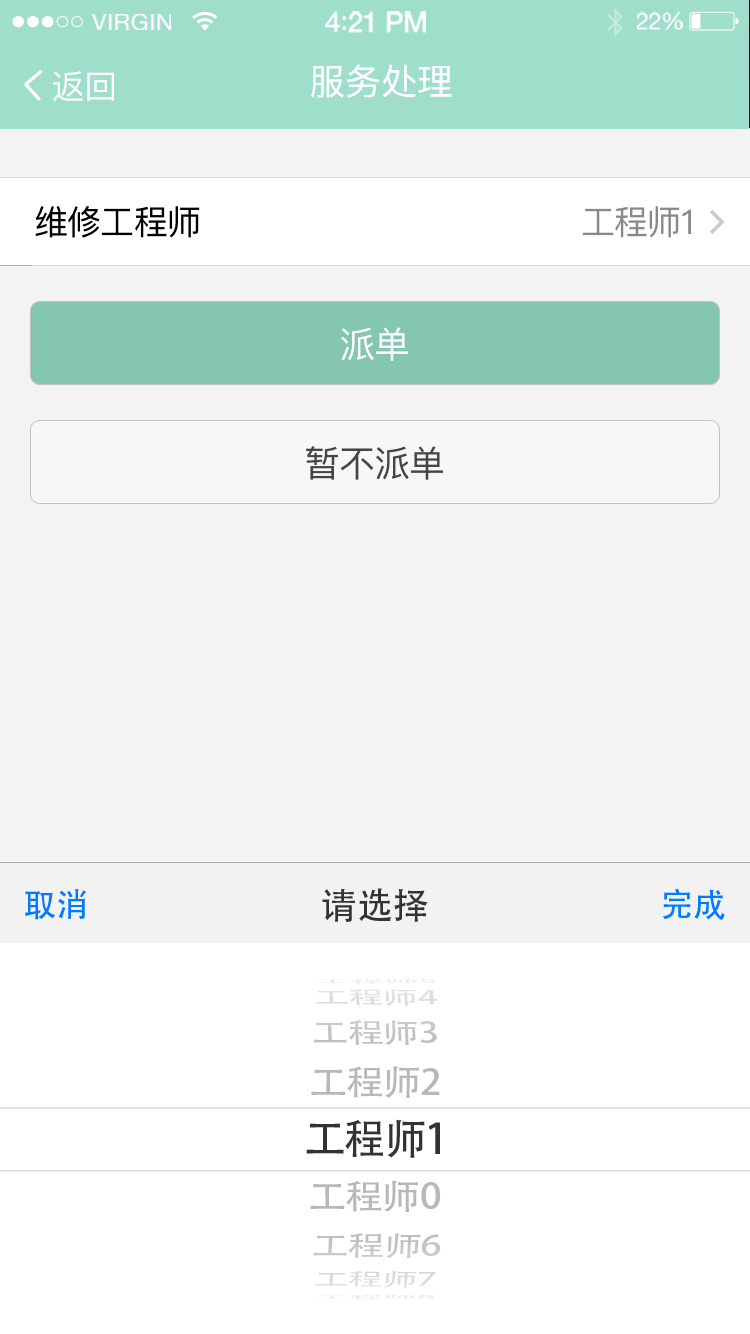
<style>
.page{position:relative;width:750px;height:1334px;background:#f3f3f3}
.page>*{position:absolute;margin:0}
.t1{font:23.4px "HelveticaNeue";letter-spacing:0.02em;color:#ffffff}
.t2{font:28.1px "HelveticaNeue-Medium";letter-spacing:-0.02em;color:#ffffff}
.t3{font:28.1px "Avenir-Medium";letter-spacing:-0.02em;color:#ffffff}
.t4{font:23.5px "HelveticaNeue";letter-spacing:-0.02em;color:#ffffff}
.t5{font:36px "PingFangSC-Medium";color:#ffffff}
.t6{font:33.3px "PingFangSC-Medium";color:#ffffff}
.t7{font:36px "PingFangSC-Medium"}
.t8{font:34px "PingFangSC-Regular";letter-spacing:-0.026em;color:#000000}
.t9{font:34px "PingFangSC-Regular";letter-spacing:-0.026em;color:#888888}
.t10{font:36px "PingFangSC-Regular";letter-spacing:-0.026em;color:#ffffff}
.t11{font:36px "PingFangSC-Regular";letter-spacing:-0.026em;color:#454545}
.t12{font:33px "MyriadPro-Regular";color:#007aff}
.t13{font:36px "MyriadPro-Regular";color:#333333}
.t14{font:18.5px "AdobeHeitiStd-Regular";letter-spacing:-0.03em;color:#dfdfdf;scale:1.93 1}
.t15{font:5.2px "AdobeHeitiStd-Regular";letter-spacing:-0.03em;color:#eaeaea;scale:6.9 1}
.t16{font:28px "AdobeHeitiStd-Regular";letter-spacing:-0.03em;color:#c5c5c5;scale:1.3 1}
.t17{font:34.9px "AdobeHeitiStd-Regular";letter-spacing:-0.03em;color:#b8b8b8;scale:1.09 1}
.t18{font:41.8px "AdobeHeitiStd-Regular";letter-spacing:-0.03em;color:#333333}
.t19{font:34.4px "AdobeHeitiStd-Regular";letter-spacing:-0.03em;color:#b8b8b8;scale:1.12 1}
.t20{font:28.1px "AdobeHeitiStd-Regular";letter-spacing:-0.03em;color:#c4c4c4;scale:1.34 1}
.t21{font:18.5px "AdobeHeitiStd-Regular";letter-spacing:-0.03em;color:#dcdcdc;scale:1.93 1}
.t22{font:5.2px "AdobeHeitiStd-Regular";letter-spacing:-0.03em;color:#ebebeb;scale:6.75 1}
</style>
<div class="page">
<p class="t1" style="left:90px;top:14px;width:81px;height:16px">VIRGIN</p>
<p class="t2" style="left:325px;top:11px;width:101px;height:22px">4<span class="t3">:</span>21 PM</p>
<p class="t4" style="left:637px;top:11px;width:46px;height:19px">22%</p>
<p class="t5" style="left:311px;top:64px;width:141px;height:34px">服务处理</p>
<p class="t6" style="left:53px;top:71px;width:61px;height:31px">返回</p>
<p class="t7" style="left:310px;top:66px;width:142px;height:34px">服务处理</p>
<p class="t8" style="left:35px;top:206px;width:165px;height:32px">维修工程师</p>
<p class="t9" style="left:582px;top:206px;width:109px;height:32px">工程师1</p>
<p class="t10" style="left:341px;top:327px;width:67px;height:34px">派单</p>
<p class="t11" style="left:306px;top:446px;width:137px;height:34px">暂不派单</p>
<p class="t12" style="left:25px;top:889px;width:62px;height:31px">取消</p>
<p class="t13" style="left:322px;top:888px;width:106px;height:34px">请选择</p>
<p class="t12" style="left:662px;top:888px;width:63px;height:32px">完成</p>
<p class="t14" style="left:316px;top:989px;width:121px;height:17px">工程师4</p>
<p class="t15" style="left:317px;top:978px;width:119px;height:6px">工程师5</p>
<p class="t16" style="left:314px;top:1020px;width:123px;height:25px">工程师3</p>
<p class="t17" style="left:311px;top:1066px;width:129px;height:32px">工程师2</p>
<p class="t18" style="left:306px;top:1119px;width:134px;height:39px">工程师1</p>
<p class="t19" style="left:310px;top:1180px;width:131px;height:32px">工程师0</p>
<p class="t20" style="left:313px;top:1233px;width:128px;height:25px">工程师6</p>
<p class="t21" style="left:315px;top:1271px;width:121px;height:17px">工程师7</p>
<p class="t22" style="left:317px;top:1294px;width:119px;height:6px">工程师8</p>
</div>
